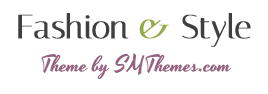
<style>
.page{position:relative;width:268px;height:94px;background:#ffffff}
.page>*{position:absolute;margin:0}
.t1{font:33.3px "Italiana-Regular";color:#3f3f3f;font-weight:bold}
.t2{font:33.3px "Italiana-Regular";color:#91aa46;font-weight:bold}
.t3{font:22.5px "Yesteryear-Regular";color:#95627f}
</style>
<div class="page">
<p class="t1" style="left:18px;top:13px;width:233px;height:34px">Fashion <span class="t2">&amp;</span> Style</p>
<p class="t3" style="left:41px;top:52px;width:191px;height:27px">Theme by SMThemes.com</p>
</div>
